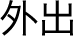
<style>
.page{position:relative;width:73px;height:36px;background:#ffffff}
.page>*{position:absolute;margin:0}
.t1{font:38.9px "HiraginoSansCNS-W3";color:#000000}
</style>
<div class="page">
<p class="t1" style="left:0px;top:0px;width:73px;height:36px">外出</p>
</div>
